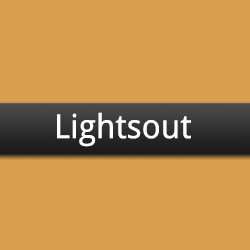
<style>
.page{position:relative;width:250px;height:250px;background:#d99f4f}
.page>*{position:absolute;margin:0}
.t1{font:33.2px "DroidSans";color:#ffffff}
</style>
<div class="page">
<p class="t1" style="left:57px;top:112px;width:134px;height:35px">Lightsout</p>
</div>
